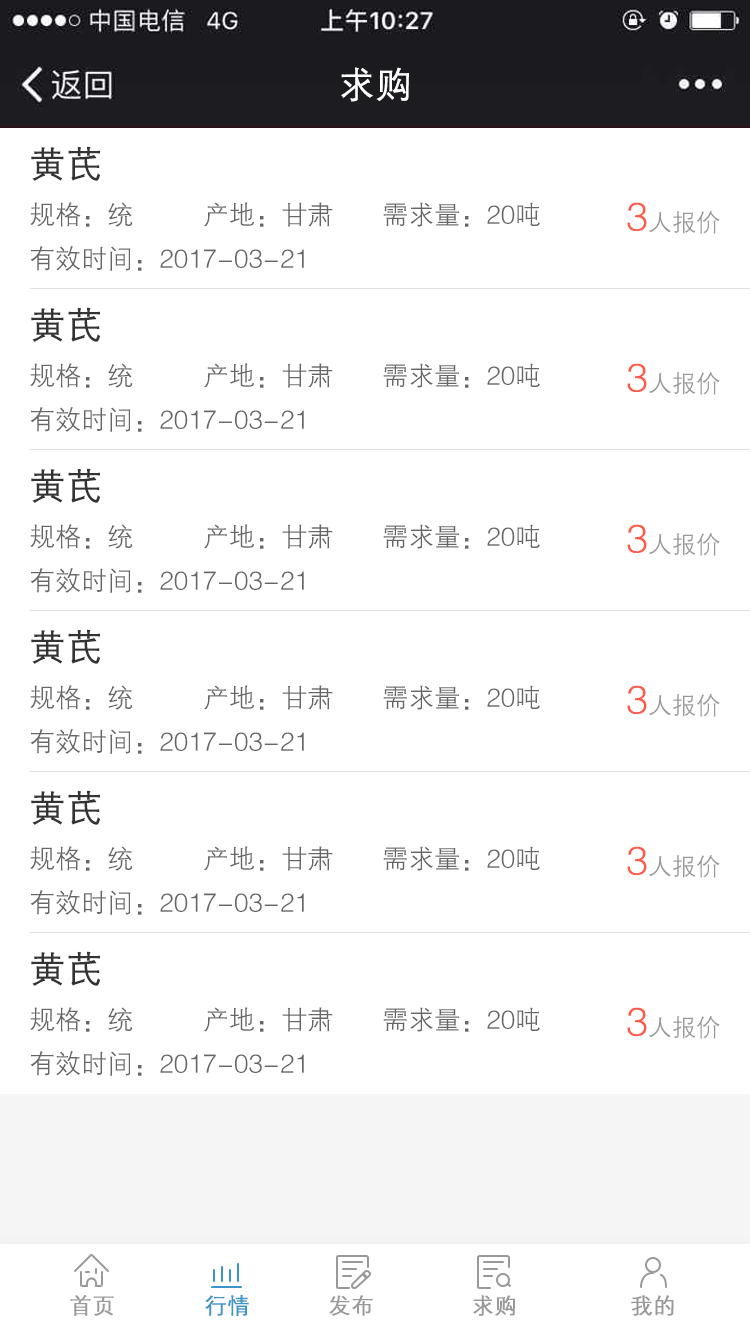
<style>
.page{position:relative;width:750px;height:1334px;background:#ffffff}
.page>*{position:absolute;margin:0}
.t1{font:36px "FZZDXJW--GB1-0";color:#ffffff;font-weight:bold}
.t2{font:36px "FZZDXJW--GB1-0";color:#333333;font-weight:bold}
.t3{font:26px "FZZDXJW--GB1-0";color:#666666}
.t4{font:24px "FZZDXJW--GB1-0";color:#999999}
.t5{font:40px "FZZDXJW--GB1-0";color:#ff5a49}
.t6{font:22px "FZZDXJW--GB1-0";color:#999999;font-weight:bold}
.t7{font:22px "FZZDXJW--GB1-0";color:#3b95c8;font-weight:bold}
</style>
<div class="page">
<p class="t1" style="left:341px;top:67px;width:68px;height:35px">求购</p>
<p class="t2" style="left:31px;top:146px;width:69px;height:35px">黄芪</p>
<p class="t3" style="left:30px;top:202px;width:103px;height:25px">规格：统</p>
<p class="t3" style="left:204px;top:202px;width:129px;height:25px">产地：甘肃</p>
<p class="t3" style="left:383px;top:202px;width:157px;height:25px">需求量：20吨</p>
<p class="t4" style="left:627px;top:202px;width:93px;height:32px"><span class="t5">3</span>人报价</p>
<p class="t3" style="left:30px;top:246px;width:274px;height:25px">有效时间：2017-03-21</p>
<p class="t2" style="left:31px;top:307px;width:69px;height:35px">黄芪</p>
<p class="t3" style="left:30px;top:363px;width:103px;height:25px">规格：统</p>
<p class="t3" style="left:204px;top:363px;width:129px;height:25px">产地：甘肃</p>
<p class="t3" style="left:383px;top:363px;width:157px;height:25px">需求量：20吨</p>
<p class="t4" style="left:627px;top:363px;width:93px;height:32px"><span class="t5">3</span>人报价</p>
<p class="t3" style="left:30px;top:407px;width:274px;height:25px">有效时间：2017-03-21</p>
<p class="t2" style="left:31px;top:468px;width:69px;height:35px">黄芪</p>
<p class="t3" style="left:30px;top:524px;width:103px;height:25px">规格：统</p>
<p class="t3" style="left:204px;top:524px;width:129px;height:25px">产地：甘肃</p>
<p class="t3" style="left:383px;top:524px;width:157px;height:25px">需求量：20吨</p>
<p class="t4" style="left:627px;top:524px;width:93px;height:32px"><span class="t5">3</span>人报价</p>
<p class="t3" style="left:30px;top:568px;width:274px;height:25px">有效时间：2017-03-21</p>
<p class="t2" style="left:31px;top:629px;width:69px;height:35px">黄芪</p>
<p class="t3" style="left:30px;top:685px;width:103px;height:25px">规格：统</p>
<p class="t3" style="left:204px;top:685px;width:129px;height:25px">产地：甘肃</p>
<p class="t3" style="left:383px;top:685px;width:157px;height:25px">需求量：20吨</p>
<p class="t4" style="left:627px;top:685px;width:93px;height:32px"><span class="t5">3</span>人报价</p>
<p class="t3" style="left:30px;top:729px;width:274px;height:25px">有效时间：2017-03-21</p>
<p class="t2" style="left:31px;top:790px;width:69px;height:35px">黄芪</p>
<p class="t3" style="left:30px;top:846px;width:103px;height:25px">规格：统</p>
<p class="t3" style="left:204px;top:846px;width:129px;height:25px">产地：甘肃</p>
<p class="t3" style="left:383px;top:846px;width:157px;height:25px">需求量：20吨</p>
<p class="t4" style="left:627px;top:846px;width:93px;height:32px"><span class="t5">3</span>人报价</p>
<p class="t3" style="left:30px;top:890px;width:274px;height:25px">有效时间：2017-03-21</p>
<p class="t2" style="left:31px;top:951px;width:69px;height:35px">黄芪</p>
<p class="t3" style="left:30px;top:1007px;width:103px;height:25px">规格：统</p>
<p class="t3" style="left:204px;top:1007px;width:129px;height:25px">产地：甘肃</p>
<p class="t3" style="left:383px;top:1007px;width:157px;height:25px">需求量：20吨</p>
<p class="t4" style="left:627px;top:1007px;width:93px;height:32px"><span class="t5">3</span>人报价</p>
<p class="t3" style="left:30px;top:1051px;width:274px;height:25px">有效时间：2017-03-21</p>
<p class="t6" style="left:70px;top:1295px;width:44px;height:21px">首页</p>
<p class="t7" style="left:205px;top:1295px;width:44px;height:21px">行情</p>
<p class="t6" style="left:329px;top:1295px;width:44px;height:21px">发布</p>
<p class="t6" style="left:473px;top:1295px;width:43px;height:21px">求购</p>
<p class="t6" style="left:631px;top:1295px;width:43px;height:21px">我的</p>
</div>
